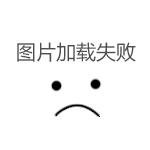
<style>
.page{position:relative;width:150px;height:150px;background:#ffffff}
.page>*{position:absolute;margin:0}
.t1{font:20px "MicrosoftYaHei";color:#4e4e4e}
</style>
<div class="page">
<p class="t1" style="left:17px;top:42px;width:119px;height:20px">图片加载失败</p>
</div>
